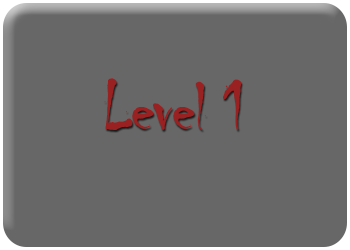
<style>
.page{position:relative;width:350px;height:250px;background:#676767}
.page>*{position:absolute;margin:0}
.t1{font:71.8px "Chiller-Regular";letter-spacing:-0.025em;color:#992122}
</style>
<div class="page">
<p class="t1" style="left:104px;top:78px;width:138px;height:52px">Level 1</p>
</div>
